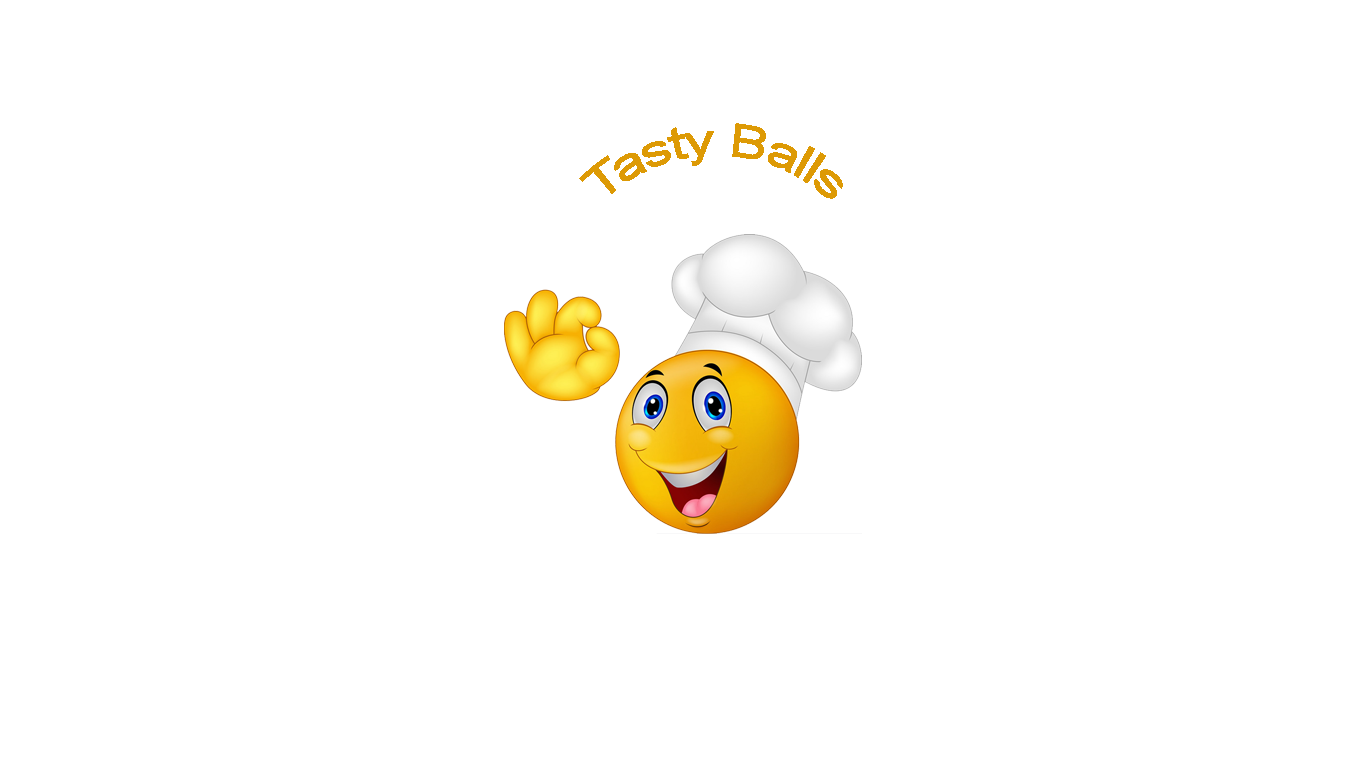
<style>
.page{position:relative;width:1366px;height:768px;background:#ffffff}
.page>*{position:absolute;margin:0}
.t1{font:44.9px "ArialMT";color:#dd9a05}
</style>
<div class="page">
<p class="t1" style="left:579px;top:123px;width:264px;height:76px">Tasty Balls</p>
</div>
